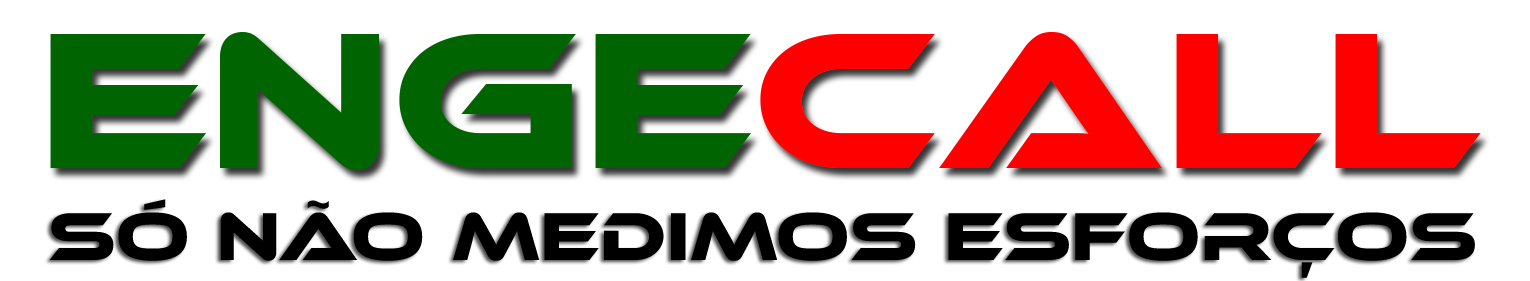
<style>
.page{position:relative;width:1530px;height:281px;background:#ffffff}
.page>*{position:absolute;margin:0}
.t1{font:70px "EthnocentricRg-Regular";color:#000000}
</style>
<div class="page">
<p class="t1" style="left:49px;top:199px;width:1426px;height:79px">Só não medimos esforços</p>
</div>
